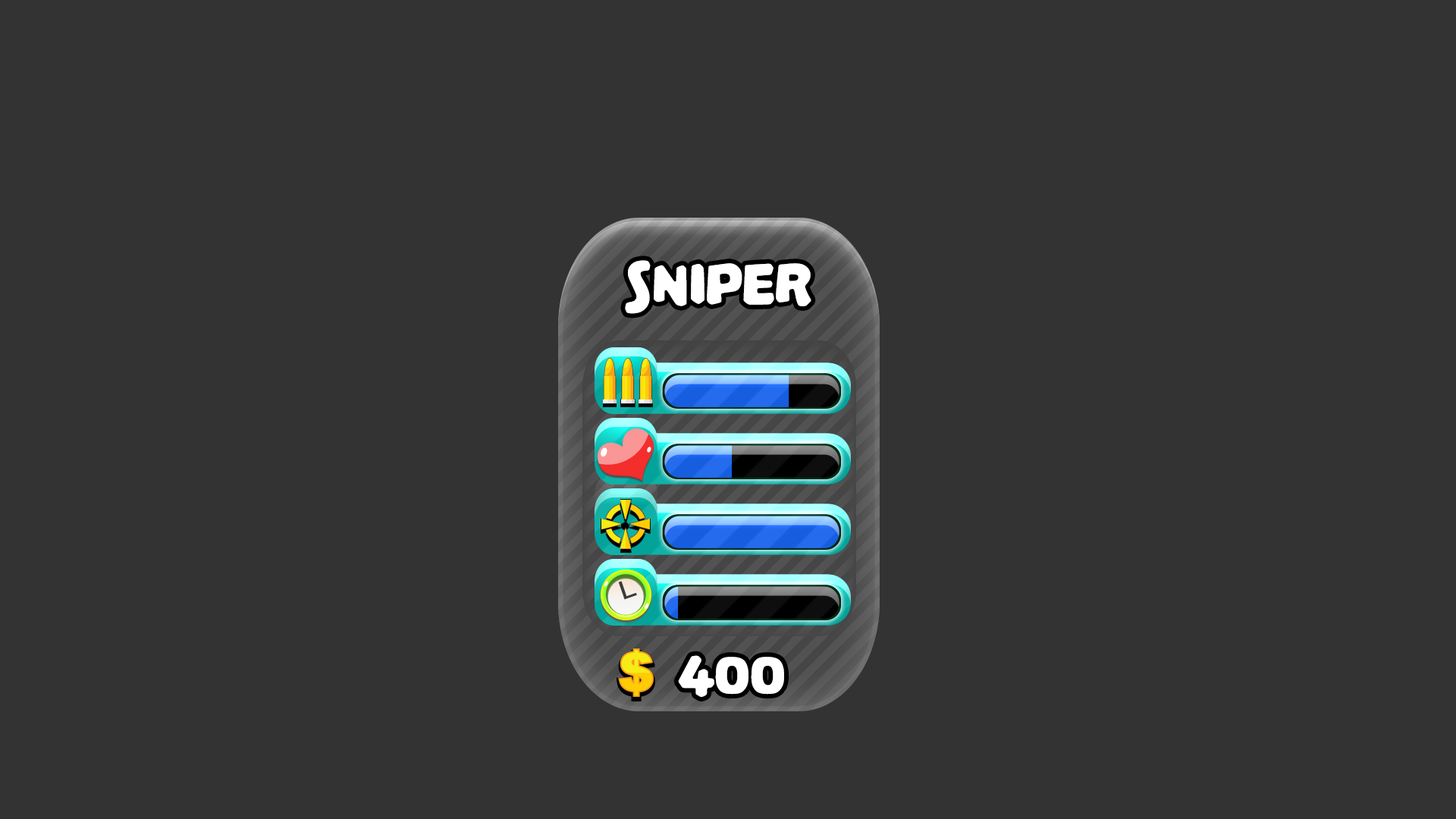
<style>
.page{position:relative;width:1456px;height:819px;background:#333333}
.page>*{position:absolute;margin:0}
.t1{font:61.8px "PalameciaTitling-Regular";letter-spacing:-0.02em;color:#ffffff}
</style>
<div class="page">
<p class="t1" style="left:625px;top:260px;width:186px;height:54px">Sniper</p>
<p class="t1" style="left:678px;top:655px;width:106px;height:42px">400</p>
</div>
